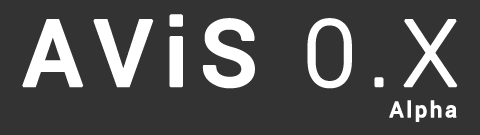
<style>
.page{position:relative;width:480px;height:135px;background:#333333}
.page>*{position:absolute;margin:0}
.t1{font:92.2px "Roboto-Medium";letter-spacing:0.1em;color:#ffffff;font-weight:bold}
.t2{font:92.2px "Roboto-Light";letter-spacing:0.1em;color:#ffffff;font-weight:bold}
.t3{font:21.8px "Roboto-Medium";letter-spacing:0.1em;color:#ffffff;font-weight:bold}
</style>
<div class="page">
<p class="t1" style="left:22px;top:14px;width:436px;height:75px">AViS <span class="t2">0.X</span></p>
<p class="t3" style="left:389px;top:100px;width:68px;height:22px">Alpha</p>
</div>
